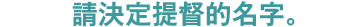
<style>
.page{position:relative;width:355px;height:27px;background:#ffffff}
.page>*{position:absolute;margin:0}
.t1{font:26px "GothicMB101Pr6N-Medium";color:#3f999c;font-weight:bold}
</style>
<div class="page">
<p class="t1" style="left:72px;top:1px;width:223px;height:26px">請決定提督的名字。</p>
</div>
